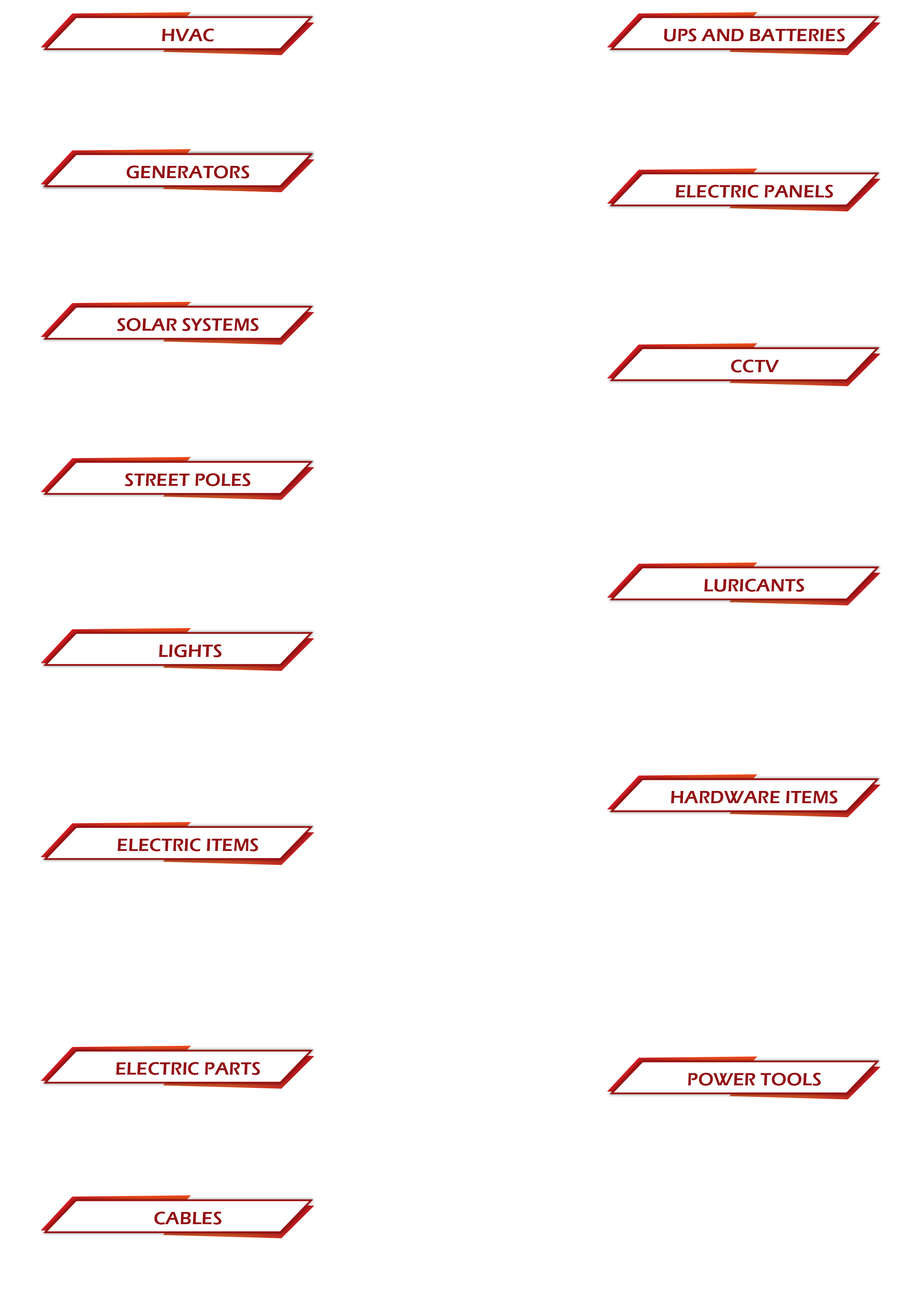
<style>
.page{position:relative;width:918px;height:1299px;background:#ffffff}
.page>*{position:absolute;margin:0}
.t1{font:18.5px "ErasITC-Demi";color:#941115}
</style>
<div class="page">
<p class="t1" style="left:162px;top:29px;width:52px;height:12px">HVAC</p>
<p class="t1" style="left:664px;top:29px;width:181px;height:12px">UPS AND BATTERIES</p>
<p class="t1" style="left:127px;top:165px;width:123px;height:13px">GENERATORS</p>
<p class="t1" style="left:127px;top:165px;width:123px;height:13px">GENERATORS</p>
<p class="t1" style="left:676px;top:185px;width:157px;height:13px">ELECTRIC PANELS</p>
<p class="t1" style="left:117px;top:318px;width:142px;height:13px">SOLAR SYSTEMS</p>
<p class="t1" style="left:731px;top:359px;width:48px;height:13px">CCTV</p>
<p class="t1" style="left:125px;top:473px;width:126px;height:13px">STREET POLES</p>
<p class="t1" style="left:704px;top:579px;width:100px;height:13px">LURICANTS</p>
<p class="t1" style="left:159px;top:644px;width:63px;height:13px">LIGHTS</p>
<p class="t1" style="left:671px;top:790px;width:167px;height:13px">HARDWARE ITEMS</p>
<p class="t1" style="left:117px;top:838px;width:141px;height:13px">ELECTRIC ITEMS</p>
<p class="t1" style="left:116px;top:1062px;width:144px;height:13px">ELECTRIC PARTS</p>
<p class="t1" style="left:688px;top:1073px;width:133px;height:12px">POWER TOOLS</p>
<p class="t1" style="left:154px;top:1211px;width:68px;height:13px">CABLES</p>
</div>
